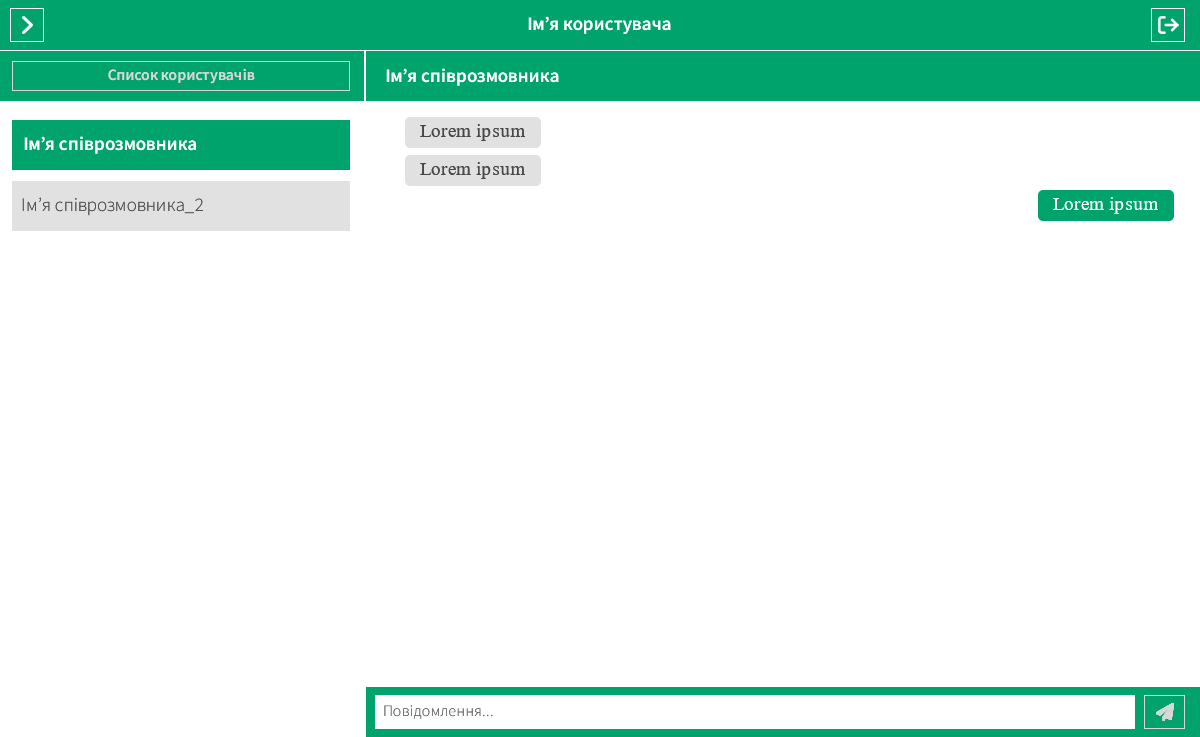
<style>
.page{position:relative;width:1200px;height:737px;background:#ffffff}
.page>*{position:absolute;margin:0}
.t1{font:32.7px "SourceSansPro-SemiBold";color:#ffffff}
.t2{font:27.2px "SourceSansPro-SemiBold";color:#d7d7d7}
.t3{font:32.7px "TimesNewRomanPSMT";color:#484848}
.t4{font:32.7px "SourceSansPro-Light";color:#484848}
.t5{font:32.7px "TimesNewRomanPSMT";color:#ffffff}
.t6{font:27.2px "SourceSansPro-Light";color:#5d5d5d}
</style>
<div class="page">
<p class="t1" style="left:528px;top:16px;width:143px;height:18px">Ім’я користувача</p>
<p class="t2" style="left:108px;top:68px;width:147px;height:16px">Список користувачів</p>
<p class="t1" style="left:386px;top:68px;width:173px;height:18px">Ім’я співрозмовника</p>
<p class="t3" style="left:420px;top:124px;width:105px;height:17px">Lorem ipsum</p>
<p class="t1" style="left:24px;top:136px;width:172px;height:18px">Ім’я співрозмовника</p>
<p class="t3" style="left:420px;top:162px;width:105px;height:17px">Lorem ipsum</p>
<p class="t4" style="left:22px;top:197px;width:181px;height:19px">Ім’я співрозмовника_2</p>
<p class="t5" style="left:1053px;top:197px;width:105px;height:17px">Lorem ipsum</p>
<p class="t6" style="left:384px;top:705px;width:109px;height:14px">Повідомлення...</p>
</div>
